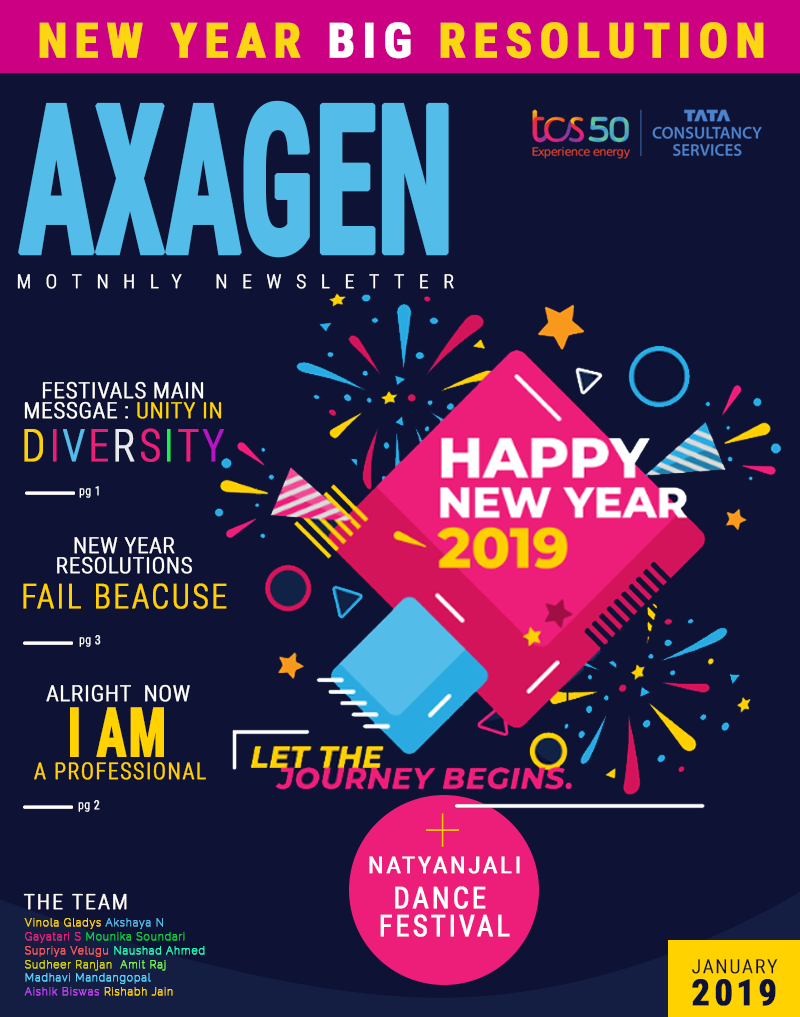
<style>
.page{position:relative;width:800px;height:1017px;background:#0e1235}
.page>*{position:absolute;margin:0}
.t1{font:48.3px "RobotoCondensed-Bold";letter-spacing:0.14em;color:#fdd613;text-transform:uppercase;font-weight:bold}
.t2{font:48.3px "RobotoCondensed-Bold";letter-spacing:0.14em;color:#ffffff;text-transform:uppercase;font-weight:bold}
.t3{font:208px "RobotoCondensed-Bold";letter-spacing:-0.02em;color:#54bce8;text-transform:uppercase;font-weight:bold;scale:0.6 1}
.t4{font:19.3px "RobotoCondensed-Light";letter-spacing:0.74em;color:#ffffff;text-transform:uppercase;font-weight:bold}
.t5{font:22.3px/20.8px "RobotoCondensed-Light";letter-spacing:0.02em;color:#ffffff;text-transform:uppercase;font-weight:bold}
.t6{font:22.3px/20.8px "RobotoCondensed-Light";letter-spacing:0.02em;color:#ffd200;text-transform:uppercase;font-weight:bold}
.t7{font:45px/42.8px "RobotoCondensed-Light";letter-spacing:0.06em;color:#ffd001;text-transform:uppercase;font-weight:bold;scale:0.92 1}
.t8{font:45px/42.8px "RobotoCondensed-Light";letter-spacing:0.06em;color:#ed1e79;text-transform:uppercase;font-weight:bold;scale:0.92 1}
.t9{font:45px/42.8px "RobotoCondensed-Light";letter-spacing:0.06em;color:#54bce8;text-transform:uppercase;font-weight:bold;scale:0.92 1}
.t10{font:45px/42.8px "RobotoCondensed-Light";letter-spacing:0.06em;color:#e8e9ed;text-transform:uppercase;font-weight:bold;scale:0.92 1}
.t11{font:45px/42.8px "RobotoCondensed-Light";letter-spacing:0.06em;color:#1eed54;text-transform:uppercase;font-weight:bold;scale:0.92 1}
.t12{font:45px/42.8px "RobotoCondensed-Light";letter-spacing:0.06em;color:#b814c7;text-transform:uppercase;font-weight:bold;scale:0.92 1}
.t13{font:12.3px "RobotoCondensed-Light";letter-spacing:0.06em;color:#ffffff;scale:0.92 1}
.t14{font:12.3px "RobotoCondensed-Light";letter-spacing:0.06em;color:#ffffff;text-transform:uppercase;font-weight:bold;scale:0.92 1}
.t15{font:34.1px/34.8px "RobotoCondensed-Light";letter-spacing:0.06em;color:#ffcf01;text-transform:uppercase;font-weight:bold;scale:0.92 1}
.t16{font:22.3px "RobotoCondensed-Light";letter-spacing:0.02em;color:#ffffff;text-transform:uppercase;font-weight:bold}
.t17{font:22.3px "RobotoCondensed-Light";letter-spacing:0.02em;color:#0e1235;text-transform:uppercase;font-weight:bold}
.t18{font:23.2px/22.8px "RobotoCondensed-Light";letter-spacing:0.06em;color:#ffcf01;text-transform:uppercase;font-weight:bold;scale:0.92 1}
.t19{font:22.3px/23.8px "RobotoCondensed-Light";letter-spacing:0.02em;color:#ffffff;text-transform:uppercase;font-weight:bold}
.t20{font:68.5px/32px "RobotoCondensed-Bold";letter-spacing:0.02em;color:#ffd200;text-transform:uppercase;font-weight:bold;scale:0.72 1}
.t21{font:23.2px/35.1px "RobotoCondensed-Regular";letter-spacing:0.08em;color:#ffffff;text-transform:uppercase;font-weight:bold;scale:1.09 1}
.t22{font:30.1px/35.1px "RobotoCondensed-Regular";letter-spacing:0.08em;color:#ffffff;text-transform:uppercase;font-weight:bold;scale:0.95 1}
.t23{font:30.1px/27.4px "RobotoCondensed-Regular";letter-spacing:0.08em;color:#ffffff;text-transform:uppercase;font-weight:bold;scale:0.95 1}
.t24{font:21.3px "RobotoCondensed-Light";letter-spacing:0.08em;color:#fdfdfd;font-weight:bold}
.t25{font:10.3px/13.8px "Raleway-Thin";letter-spacing:0.08em;color:#56d5ff;font-weight:bold}
.t26{font:10.3px/13.8px "Raleway-Thin";letter-spacing:0.08em;color:#ffd200;font-weight:bold}
.t27{font:10.3px/13.8px "Raleway-Thin";letter-spacing:0.08em;color:#54bce8;font-weight:bold}
.t28{font:10.3px/13.8px "Raleway-Thin";letter-spacing:0.08em;color:#ed1e79;font-weight:bold}
.t29{font:10.3px/13.8px "Raleway-Thin";letter-spacing:0.08em;color:#0acf3d;font-weight:bold}
.t30{font:10.3px/13.8px "Raleway-Thin";letter-spacing:0.08em;color:#ff5959;font-weight:bold}
.t31{font:10.3px/13.8px "Raleway-Thin";letter-spacing:0.08em;color:#1efeb7;font-weight:bold}
.t32{font:10.3px/13.8px "Raleway-Thin";letter-spacing:0.08em;color:#d7d400;font-weight:bold}
.t33{font:10.3px/13.8px "Raleway-Thin";letter-spacing:0.08em;color:#7bf450;font-weight:bold}
.t34{font:10.3px/13.8px "Raleway-Thin";letter-spacing:0.08em;color:#bd43f5;font-weight:bold}
.t35{font:19.3px/23.8px "RobotoCondensed-Light";letter-spacing:0.08em;color:#0e1235;text-transform:uppercase;font-weight:bold}
.t36{font:36.3px/31.8px "RobotoCondensed-Bold";letter-spacing:0.08em;color:#0e1235;text-transform:uppercase;font-weight:bold}
</style>
<div class="page">
<p class="t1" style="left:39px;top:22px;width:725px;height:37px">NEW YEAR <span class="t2">BIG </span>RESOLUTION</p>
<p class="t3" style="left:18px;top:100px;width:431px;height:158px">axagen</p>
<p class="t4" style="left:17px;top:274px;width:437px;height:15px">motnhly newsLETTER</p>
<p class="t5" style="left:24px;top:381px;width:200px;height:81px;text-align:center">festivals main<br>messgae : <span class="t6">unity in<br></span><span class="t7">D</span><span class="t8">i</span><span class="t9">v</span><span class="t8">e</span><span class="t10">r</span><span class="t8">s</span><span class="t11">i</span><span class="t8">t</span><span class="t12">y</span></p>
<p class="t13" style="left:79px;top:486px;width:20px;height:12px">pg <span class="t14">1</span></p>
<p class="t5" style="left:23px;top:537px;width:204px;height:72px;text-align:center">New Year<br>Resolutions<br><span class="t15">fail beacuse</span></p>
<p class="t13" style="left:79px;top:635px;width:22px;height:12px">pg <span class="t14">3</span></p>
<p class="t16" style="left:46px;top:684px;width:144px;height:18px">alright  now</p>
<p class="t17" style="left:562px;top:691px;width:11px;height:17px">t</p>
<p class="t18" style="left:34px;top:707px;width:172px;height:73px;text-align:center"><span class="t19"> <br></span><span class="t20">I am <br></span>a professional</p>
<p class="t13" style="left:78px;top:800px;width:22px;height:12px">pg <span class="t14">2</span></p>
<p class="t21" style="left:369px;top:856px;width:151px;height:81px;text-align:center">natyanjali<br><span class="t22">dance <br></span><span class="t23">festival</span></p>
<p class="t24" style="left:23px;top:893px;width:104px;height:17px">THE TEAM</p>
<p class="t25" style="left:24px;top:918px;width:181px;height:78px"><span class="t26">Vinola Gladys </span><span class="t27">Akshaya N<br></span><span class="t28">Gayatari S </span><span class="t29">Mounika Soundari <br></span><span class="t30">Supriya Velugu </span><span class="t31">Naushad Ahmed <br></span><span class="t32">Sudheer Ranjan  </span><span class="t33">Amit Raj <br></span>Madhavi Mandangopal<br><span class="t34">Aishik Biswas </span><span class="t26">Rishabh Jain</span></p>
<p class="t35" style="left:692px;top:959px;width:86px;height:47px;text-align:center">january<br><span class="t36">2019</span></p>
</div>
